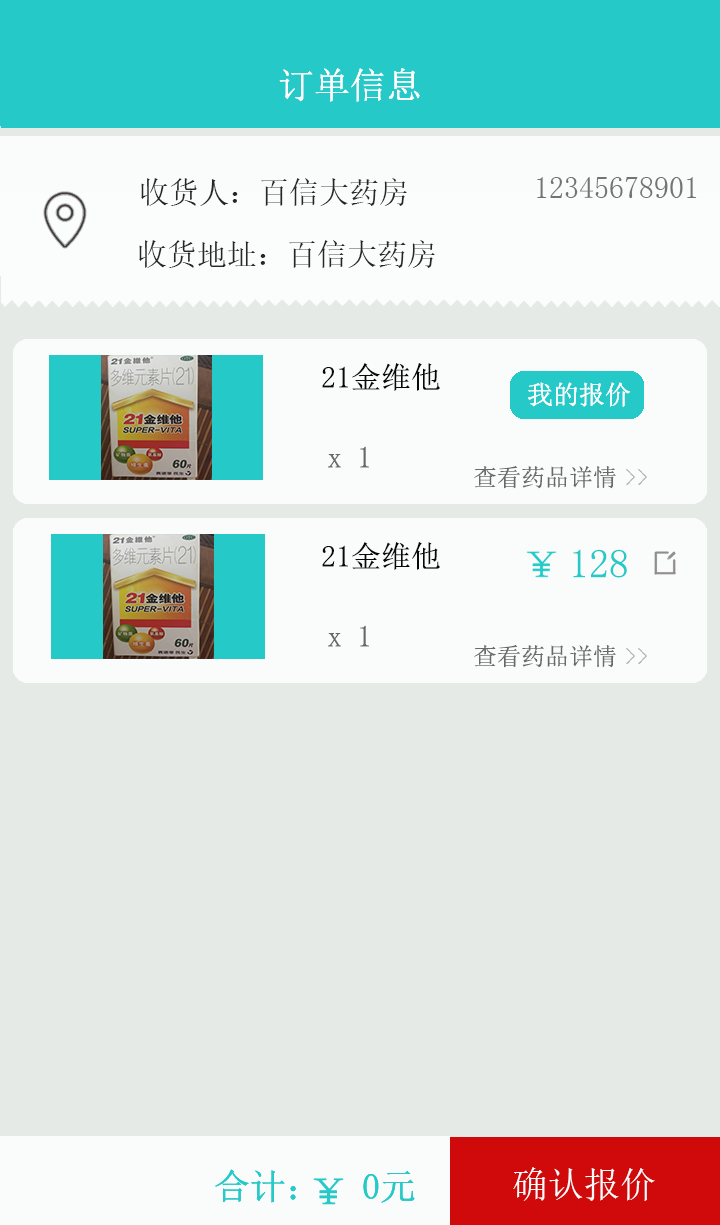
<style>
.page{position:relative;width:720px;height:1225px;background:#e5eae6}
.page>*{position:absolute;margin:0}
.t1{font:36px "SimSun";color:#fdfcfc}
.t2{font:30px "NSimSun";color:#252727}
.t3{font:30px "NSimSun";color:#727373}
.t4{font:30px "SimSun";color:#080808}
.t5{font:26px "SimSun";color:#fafcfc}
.t6{font:30px "SimSun";color:#686969}
.t7{font:24px "SimSun";color:#686969}
.t8{font:40px "SimSun";color:#25c9c8}
.t9{font:36px "NSimSun";color:#fafcfc}
</style>
<div class="page">
<p class="t1" style="left:279px;top:68px;width:141px;height:34px">订单信息</p>
<p class="t1" style="left:279px;top:68px;width:141px;height:34px">订单信息</p>
<p class="t2" style="left:141px;top:178px;width:266px;height:28px">收货人：百信大药房</p>
<p class="t3" style="left:537px;top:177px;width:160px;height:21px">12345678901</p>
<p class="t2" style="left:139px;top:240px;width:296px;height:28px">收货地址：百信大药房</p>
<p class="t4" style="left:322px;top:363px;width:118px;height:28px">21金维他</p>
<p class="t5" style="left:528px;top:382px;width:102px;height:25px">我的报价</p>
<p class="t5" style="left:528px;top:382px;width:102px;height:25px">我的报价</p>
<p class="t6" style="left:328px;top:446px;width:41px;height:22px">x 1</p>
<p class="t7" style="left:474px;top:466px;width:142px;height:23px">查看药品详情</p>
<p class="t4" style="left:322px;top:542px;width:118px;height:28px">21金维他</p>
<p class="t8" style="left:573px;top:549px;width:54px;height:29px">128</p>
<p class="t6" style="left:328px;top:625px;width:41px;height:22px">x 1</p>
<p class="t7" style="left:474px;top:645px;width:142px;height:23px">查看药品详情</p>
<p class="t9" style="left:513px;top:1167px;width:142px;height:34px">确认报价</p>
</div>
